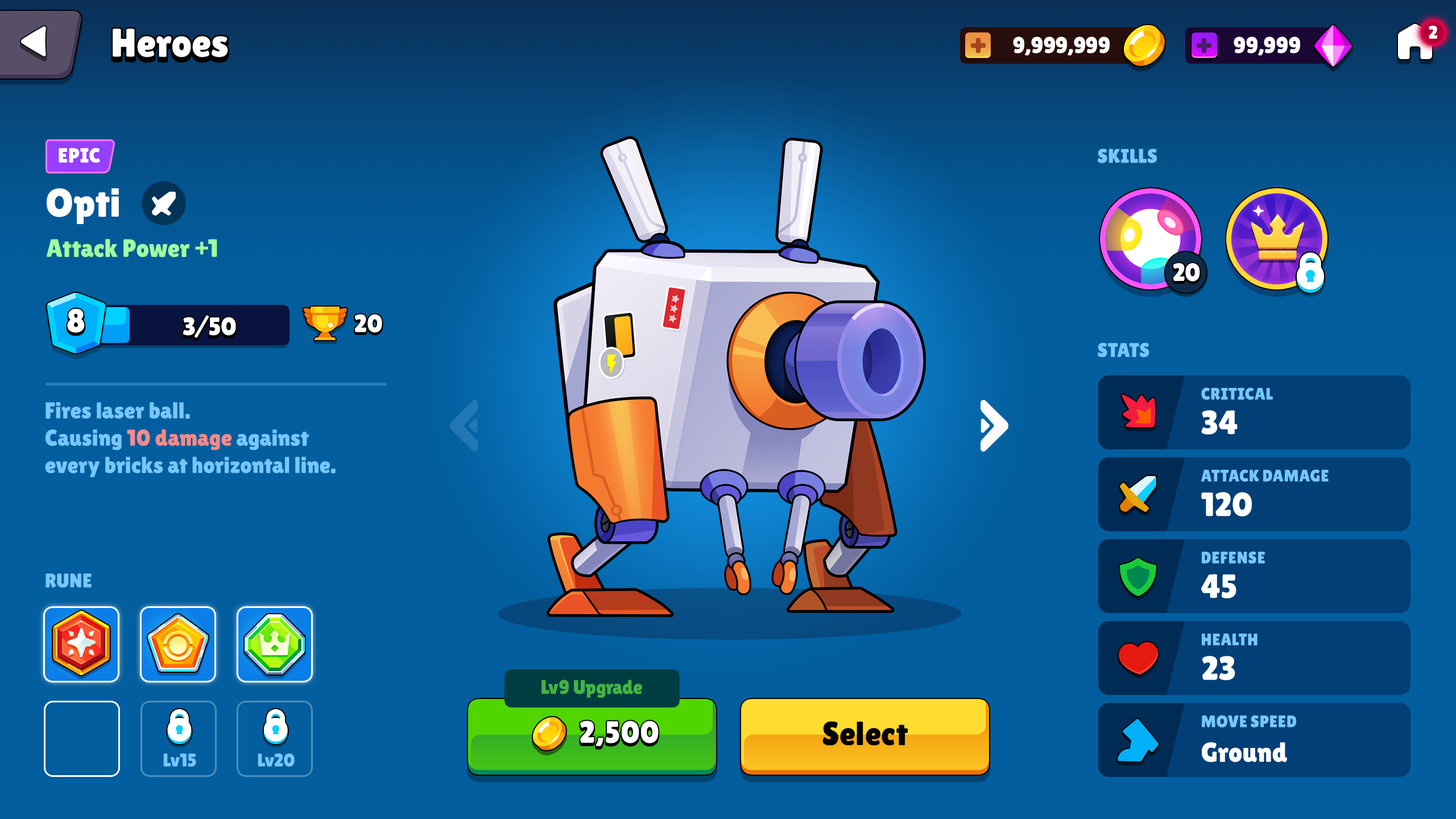
<style>
.page{position:relative;width:1456px;height:819px;background:#025e9e}
.page>*{position:absolute;margin:0}
.t1{font:39.8px "LilitaOne";color:#ffffff}
.t2{font:18.2px "LilitaOne";color:#ffffff;text-transform:uppercase}
.t3{font:22.7px "LilitaOne";letter-spacing:-0.01em;color:#ffffff;text-transform:uppercase}
.t4{font:20.5px "LilitaOne";color:#ffffff;text-transform:uppercase}
.t5{font:19.7px "LilitaOne";color:#76c7ff;text-transform:uppercase}
.t6{font:25px "LilitaOne";color:#9fff9f}
.t7{font:25px "LilitaOne";color:#ffffff}
.t8{font:33px "LilitaOne";color:#ffffff;text-transform:uppercase}
.t9{font:25px "LilitaOne";color:#ffffff;text-transform:uppercase}
.t10{font:16.7px "LilitaOne";color:#76c7ff;text-transform:uppercase}
.t11{font:22.7px "LilitaOne";color:#76c7ff}
.t12{font:22.7px "LilitaOne";color:#f48a8a}
.t13{font:33.4px "LilitaOne";color:#ffffff}
.t14{font:19.7px "LilitaOne";color:#43b443}
.t15{font:30.7px "LilitaOne";letter-spacing:0.02em;color:#ffffff}
.t16{font:33.4px "LilitaOne";letter-spacing:0.02em;color:#000000}
.t17{font:27.3px "LilitaOne";color:#ffffff}
.t18{font:18.2px "LilitaOne";color:#76c7ff}
</style>
<div class="page">
<p class="t1" style="left:113px;top:28px;width:115px;height:29px">Heroes</p>
<p class="t2" style="left:1429px;top:26px;width:8px;height:13px">2</p>
<p class="t3" style="left:1013px;top:36px;width:97px;height:20px">9,999,999</p>
<p class="t3" style="left:1234px;top:36px;width:66px;height:20px">99,999</p>
<p class="t4" style="left:59px;top:148px;width:41px;height:15px">Epic</p>
<p class="t5" style="left:1098px;top:148px;width:59px;height:15px">Skills</p>
<p class="t1" style="left:47px;top:188px;width:72px;height:36px">Opti</p>
<p class="t6" style="left:47px;top:239px;width:170px;height:18px">Attack Power +1</p>
<p class="t7" style="left:1173px;top:263px;width:27px;height:19px">20</p>
<p class="t8" style="left:67px;top:309px;width:18px;height:24px">8</p>
<p class="t9" style="left:183px;top:315px;width:53px;height:23px">3/50</p>
<p class="t9" style="left:355px;top:314px;width:27px;height:19px">20</p>
<p class="t5" style="left:1098px;top:342px;width:51px;height:15px">Stats</p>
<p class="t10" style="left:1201px;top:387px;width:72px;height:13px">Critical</p>
<p class="t11" style="left:45px;top:402px;width:291px;height:75px">Fires laser ball. <br>Causing <span class="t12">10 damage</span> against <br>every bricks at horizontal line.</p>
<p class="t13" style="left:1201px;top:410px;width:37px;height:25px">34</p>
<p class="t10" style="left:1201px;top:469px;width:128px;height:13px">Attack Damage</p>
<p class="t13" style="left:1201px;top:492px;width:51px;height:24px">120</p>
<p class="t10" style="left:1202px;top:551px;width:63px;height:13px">Defense</p>
<p class="t5" style="left:45px;top:573px;width:47px;height:15px">Rune</p>
<p class="t13" style="left:1201px;top:574px;width:35px;height:24px">45</p>
<p class="t10" style="left:1202px;top:634px;width:55px;height:12px">Health</p>
<p class="t13" style="left:1202px;top:656px;width:33px;height:24px">23</p>
<p class="t14" style="left:541px;top:680px;width:101px;height:18px">Lv9 Upgrade</p>
<p class="t15" style="left:580px;top:721px;width:79px;height:25px">2,500</p>
<p class="t16" style="left:822px;top:721px;width:86px;height:25px">Select</p>
<p class="t10" style="left:1202px;top:715px;width:95px;height:12px">Move Speed</p>
<p class="t17" style="left:1202px;top:742px;width:85px;height:20px">Ground</p>
<p class="t18" style="left:163px;top:754px;width:33px;height:13px">Lv15</p>
<p class="t18" style="left:258px;top:753px;width:37px;height:14px">Lv20</p>
</div>
